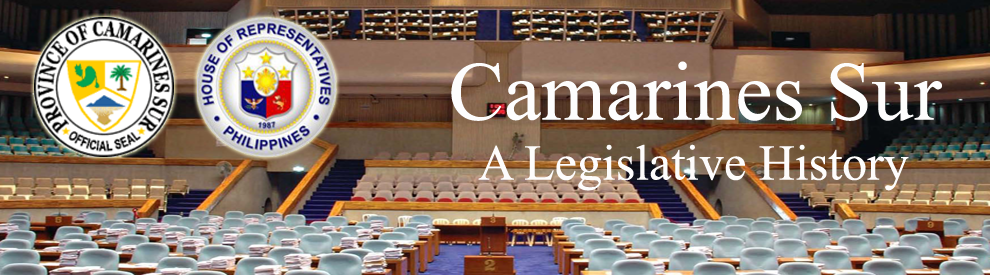
<style>
.page{position:relative;width:990px;height:275px}
.page>*{position:absolute;margin:0}
.t1{font:50px "TimesNewRomanPSMT";color:#fdfcfc}
.t2{font:83.3px "TimesNewRomanPSMT";color:#fdfdfd}
</style>
<div class="page">
<p class="t1" style="left:451px;top:61px;width:491px;height:130px;text-align:center"><span class="t2">Camarines Sur<br></span>A Legislative History</p>
</div>
